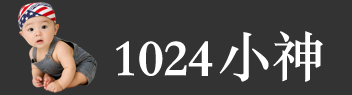
<style>
.page{position:relative;width:352px;height:95px;background:#333333}
.page>*{position:absolute;margin:0}
.t1{font:53px "STSongti-SC-Black";color:#ffffff}
.t2{font:53px "STSongti-SC-Bold";color:#ffffff}
</style>
<div class="page">
<p class="t1" style="left:116px;top:41px;width:97px;height:35px">1024</p>
<p class="t2" style="left:219px;top:31px;width:104px;height:51px">小神</p>
</div>
